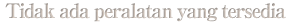
<style>
.page{position:relative;width:292px;height:24px;background:#ffffff}
.page>*{position:absolute;margin:0}
.t1{font:20px "RyuminPro-ExBold";letter-spacing:-0.08em;color:#bfb5ae}
</style>
<div class="page">
<p class="t1" style="left:5px;top:3px;width:281px;height:19px">Tidak ada peralatan yang tersedia</p>
</div>
